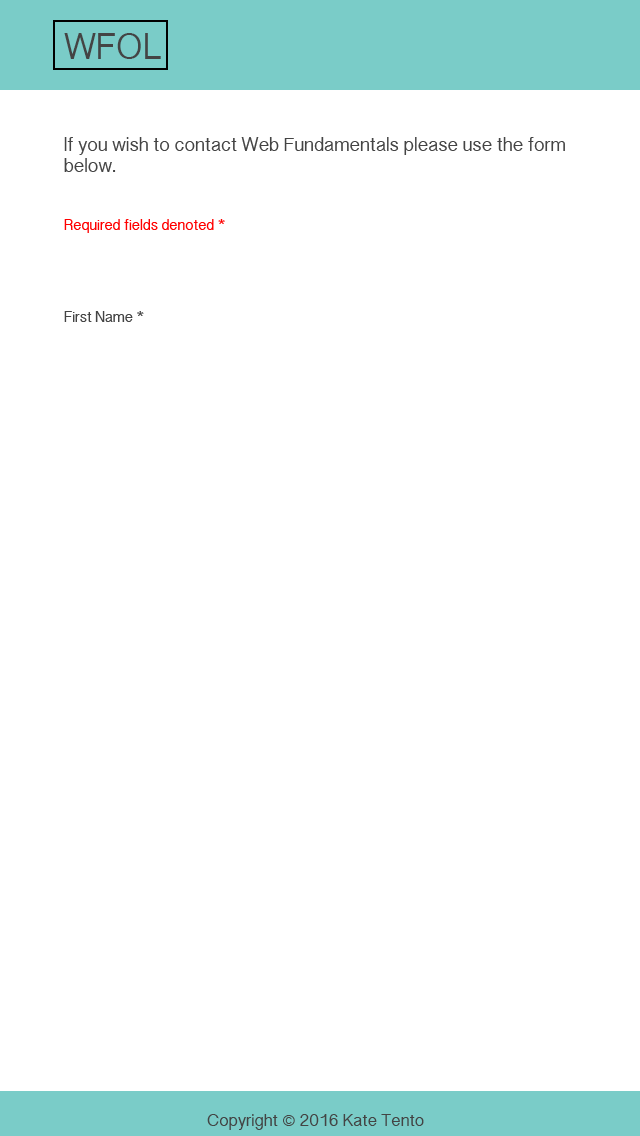
<style>
.page{position:relative;width:640px;height:1136px;background:#ffffff}
.page>*{position:absolute;margin:0}
.t1{font:34px "SinhalaSangamMN";color:#444444}
.t2{font:18px "SinhalaSangamMN";color:#444444}
.t3{font:14px "SinhalaSangamMN";color:#ff0000}
.t4{font:14px "SinhalaSangamMN";color:#444444}
.t5{font:16px "SinhalaSangamMN";color:#444444}
</style>
<div class="page">
<p class="t1" style="left:64px;top:33px;width:97px;height:26px">WFOL</p>
<p class="t2" style="left:64px;top:137px;width:501px;height:35px">If you wish to contact Web Fundamentals please use the form below.</p>
<p class="t3" style="left:64px;top:219px;width:161px;height:14px">Required fields denoted *</p>
<p class="t4" style="left:64px;top:311px;width:80px;height:11px">First Name *</p>
<p class="t5" style="left:207px;top:1114px;width:217px;height:16px">Copyright © 2016 Kate Tento</p>
</div>
